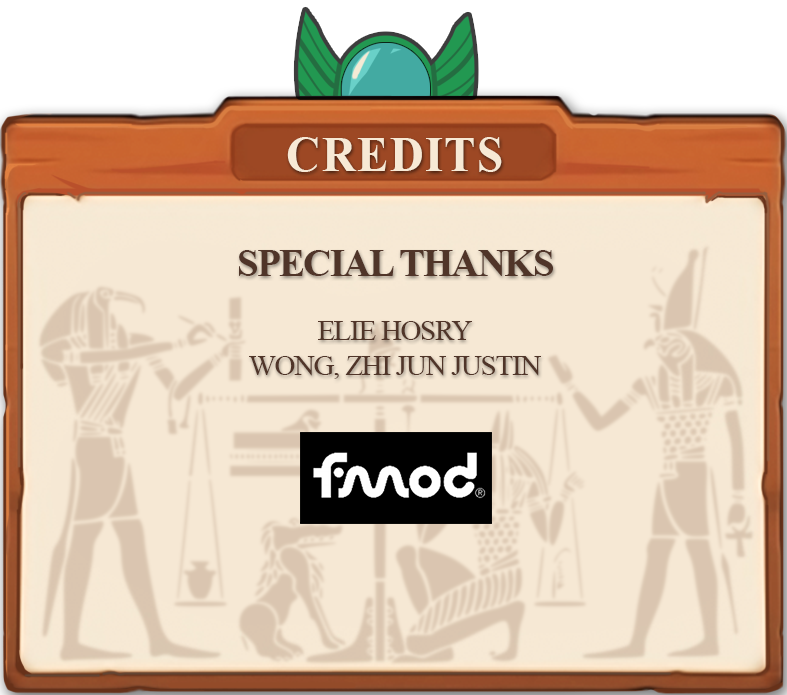
<style>
.page{position:relative;width:787px;height:695px;background:#f6e8d4}
.page>*{position:absolute;margin:0}
.t1{font:50px "TimesNewRomanPS-BoldMT";letter-spacing:0.02em;color:#f7e9d5;scale:0.95 1}
.t2{font:39.2px "TimesNewRomanPS-BoldMT";letter-spacing:-0.04em;color:#503529}
.t3{font:29.2px "TimesNewRomanPSMT";letter-spacing:-0.04em;color:#503529}
</style>
<div class="page">
<p class="t1" style="left:287px;top:137px;width:215px;height:35px">CREDITS</p>
<p class="t2" style="left:239px;top:250px;width:314px;height:26px">SPECIAL THANKS</p>
<p class="t3" style="left:249px;top:321px;width:292px;height:58px;text-align:center">ELIE HOSRY<br>WONG, ZHI JUN JUSTIN</p>
</div>
